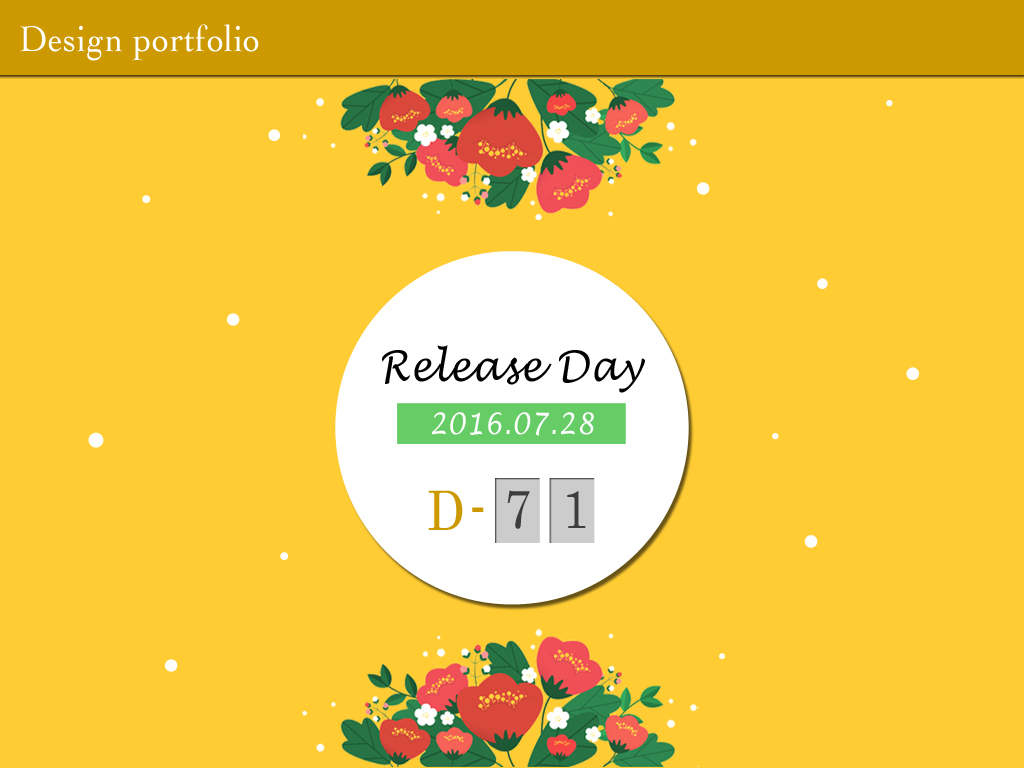
<style>
.page{position:relative;width:1024px;height:768px;background:#ffcc33}
.page>*{position:absolute;margin:0}
.t1{font:37.5px "Cochin";letter-spacing:0.025em;color:#ffffff;scale:0.9 1}
.t2{font:41.7px "LucidaHandwriting-Italic";letter-spacing:0.025em;color:#000000;scale:0.9 1}
.t3{font:29.2px "LucidaHandwriting-Italic";letter-spacing:0.025em;color:#ffffff;scale:0.9 1}
.t4{font:54.2px "CenturySchoolbook";letter-spacing:0.025em;color:#cc9900;scale:0.9 1}
.t5{font:54.2px "CenturySchoolbook";letter-spacing:0.025em;color:#3d3d3d;scale:0.9 1}
.t6{font:58.3px "CenturySchoolbook";letter-spacing:0.025em;color:#cc9900;scale:0.9 1}
</style>
<div class="page">
<p class="t1" style="left:20px;top:24px;width:239px;height:37px">Design portfolio</p>
<p class="t2" style="left:382px;top:345px;width:263px;height:48px">Release Day</p>
<p class="t3" style="left:432px;top:412px;width:162px;height:24px">2016.07.28</p>
<p class="t4" style="left:428px;top:490px;width:35px;height:40px">D</p>
<p class="t5" style="left:507px;top:490px;width:79px;height:39px">7  1</p>
<p class="t6" style="left:472px;top:507px;width:12px;height:5px">-</p>
</div>
